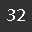
<style>
.page{position:relative;width:32px;height:32px;background:#333333}
.page>*{position:absolute;margin:0}
.t1{font:17.8px "MyriadPro-Regular";color:#ffffff;scale:1.12 1}
</style>
<div class="page">
<p class="t1" style="left:7px;top:9px;width:18px;height:12px">32</p>
</div>
